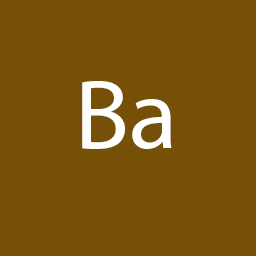
<style>
.page{position:relative;width:256px;height:256px;background:#765007}
.page>*{position:absolute;margin:0}
.t1{font:100px "MyriadPro-Regular";color:#ffffff}
</style>
<div class="page">
<p class="t1" style="left:82px;top:81px;width:90px;height:68px">Ba</p>
</div>
